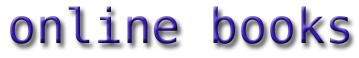
<style>
.page{position:relative;width:359px;height:58px;background:#ffffff}
.page>*{position:absolute;margin:0}
.t1{font:48px "DejaVuSansMono"}
</style>
<div class="page">
<p class="t1" style="left:10px;top:6px;width:339px;height:38px">online books</p>
</div>
